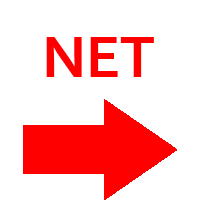
<style>
.page{position:relative;width:200px;height:200px;background:#ffffff}
.page>*{position:absolute;margin:0}
.t1{font:60.5px "Corbel-Bold";color:#ff0000}
</style>
<div class="page">
<p class="t1" style="left:46px;top:37px;width:108px;height:40px">NET</p>
</div>
